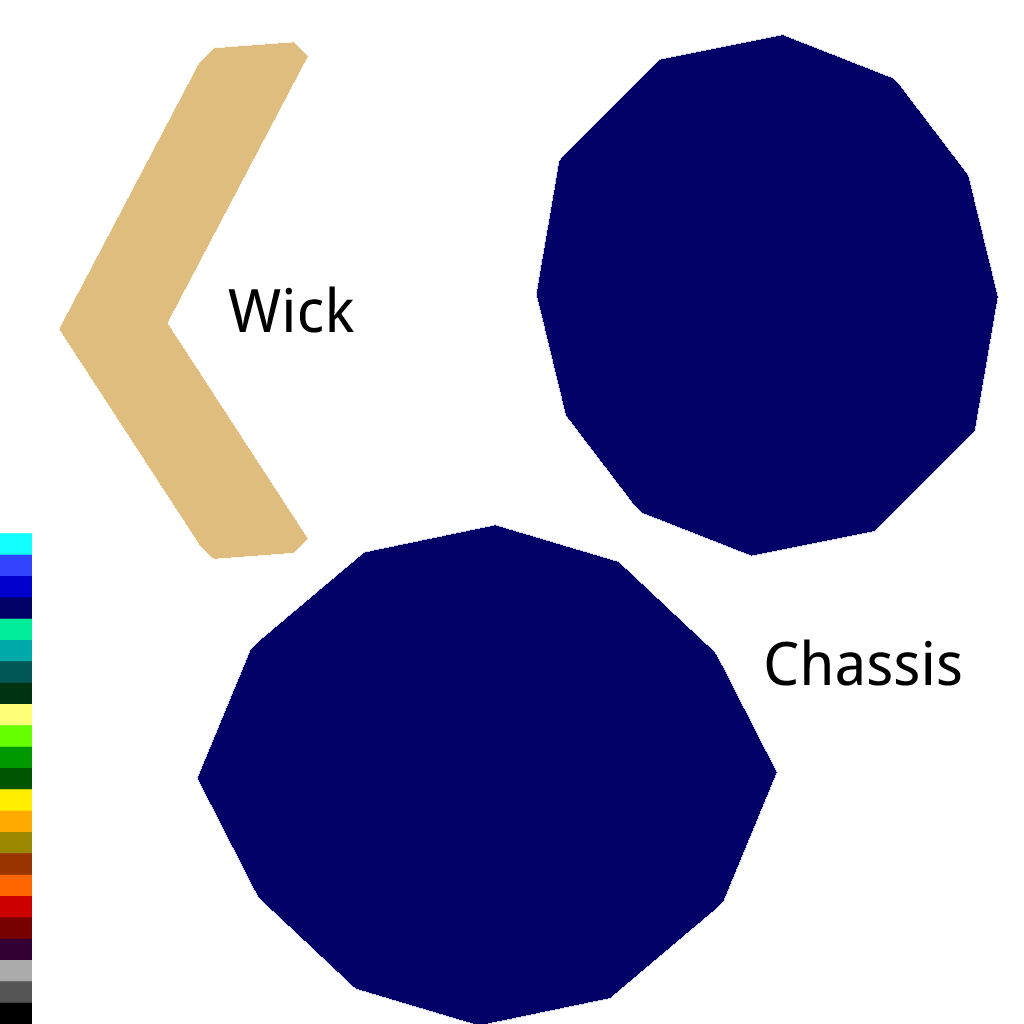
<style>
.page{position:relative;width:1024px;height:1024px;background:#ffffff}
.page>*{position:absolute;margin:0}
.t1{font:60px "DroidSans";color:#000000}
</style>
<div class="page">
<p class="t1" style="left:228px;top:286px;width:126px;height:47px">Wick</p>
<p class="t1" style="left:766px;top:639px;width:195px;height:47px">Chassis</p>
</div>
